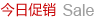
<style>
.page{position:relative;width:95px;height:19px;background:#ffffff}
.page>*{position:absolute;margin:0}
.t1{font:14px "MicrosoftYaHei";color:#c90809}
.t2{font:16px "ArialMT";color:#9f9f9f}
</style>
<div class="page">
<p class="t1" style="left:0px;top:3px;width:56px;height:14px">今日促销</p>
<p class="t2" style="left:63px;top:4px;width:31px;height:12px">Sale</p>
</div>
